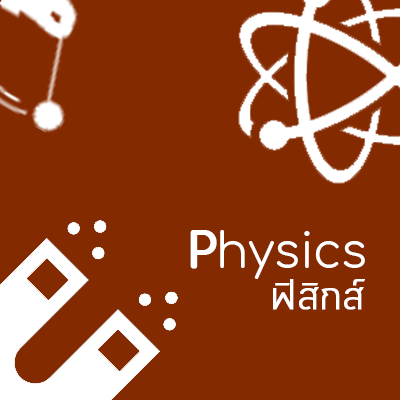
<style>
.page{position:relative;width:400px;height:400px;background:#842a00}
.page>*{position:absolute;margin:0}
.t1{font:48px "Comfortaa-Regular";letter-spacing:-0.01em;color:#ffffff}
.t2{font:48px "Comfortaa-Bold";letter-spacing:-0.01em;color:#ffffff;font-weight:bold}
.t3{font:41.8px "Cloud-Light";letter-spacing:-0.01em;color:#ffffff;font-weight:bold}
</style>
<div class="page">
<p class="t1" style="left:190px;top:230px;width:175px;height:49px"><span class="t2">P</span>hysics</p>
<p class="t3" style="left:273px;top:279px;width:92px;height:31px">ฟิสิกส์</p>
</div>
